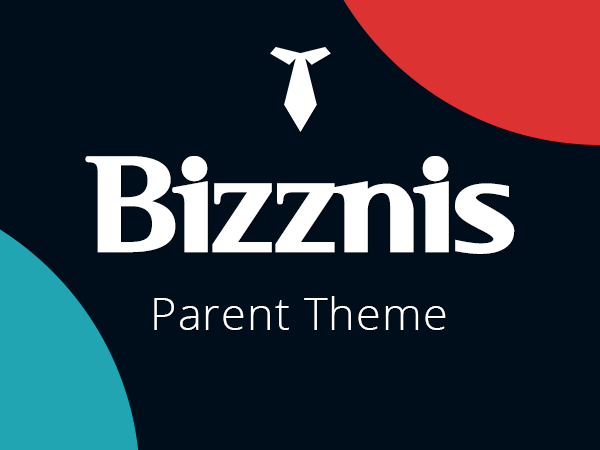
<style>
.page{position:relative;width:600px;height:450px;background:#000d1a}
.page>*{position:absolute;margin:0}
.t1{font:150px "SerifBlack";letter-spacing:0.025em;color:#ffffff}
.t2{font:45px "OpenSans-Light";letter-spacing:0.025em;color:#ffffff}
</style>
<div class="page">
<p class="t1" style="left:85px;top:156px;width:430px;height:98px">Bizznis</p>
<p class="t2" style="left:154px;top:296px;width:292px;height:34px">Parent Theme</p>
</div>
